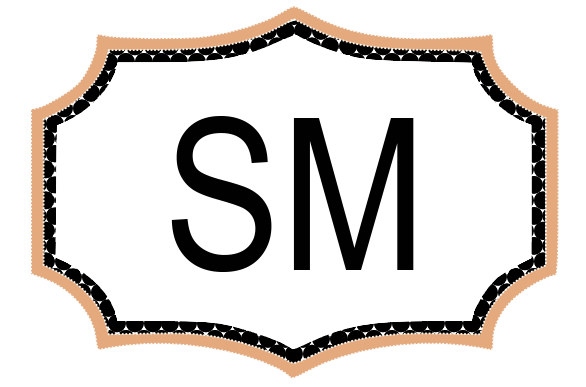
<style>
.page{position:relative;width:586px;height:387px;background:#ffffff}
.page>*{position:absolute;margin:0}
.t1{font:213.3px "ArialNarrow";color:#010101}
</style>
<div class="page">
<p class="t1" style="left:171px;top:116px;width:243px;height:156px">SM</p>
</div>
